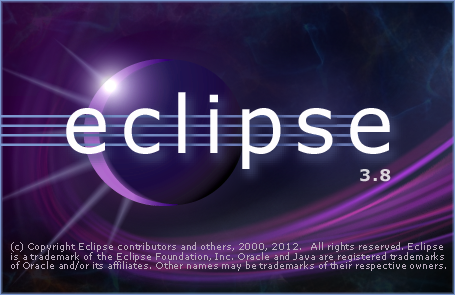
<style>
.page{position:relative;width:455px;height:295px}
.page>*{position:absolute;margin:0}
.t1{font:16px "Verdana-Bold";letter-spacing:0.1em;color:#dad3dc}
.t2{font:9.3px/9.3px "Verdana";letter-spacing:-0.013em;color:#baabbd}
.t3{font:9.3px/9.3px "Verdana";letter-spacing:-0.01em;color:#baabbd}
</style>
<div class="page">
<p class="t1" style="left:360px;top:169px;width:31px;height:13px">3.8</p>
<p class="t2" style="left:11px;top:242px;width:435px;height:29px"><span class="t3">(c) Copyright Eclipse contributors and others, 2000, 2012.   All rights reserved. Eclipse<br></span>is a trademark of  the Eclipse Foundation, Inc. Oracle and Java are registered trademarks<br>of Oracle and/or its affiliates. Other names may be trademarks of their respective owners.</p>
</div>
